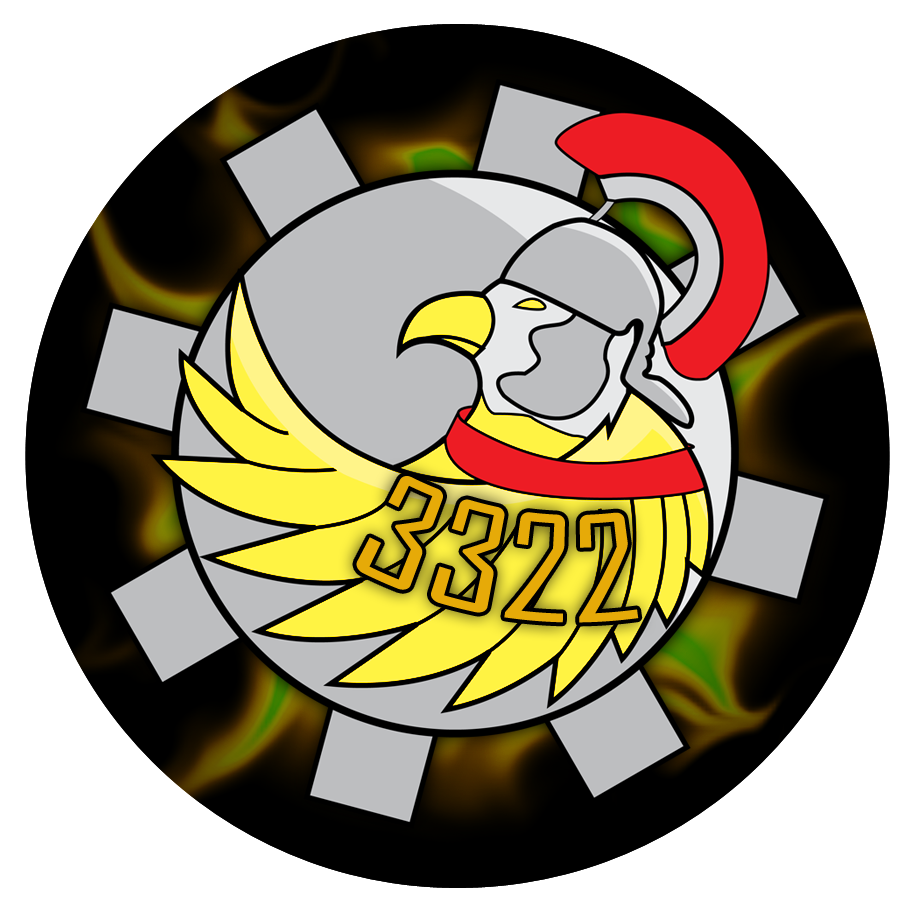
<style>
.page{position:relative;width:900px;height:900px;background:#ffffff}
.page>*{position:absolute;margin:0}
.t1{font:140.3px "AgencyFB-Reg";color:#e6aa08}
</style>
<div class="page">
<p class="t1" style="left:356px;top:476px;width:283px;height:147px;rotate:10deg">3322</p>
</div>
